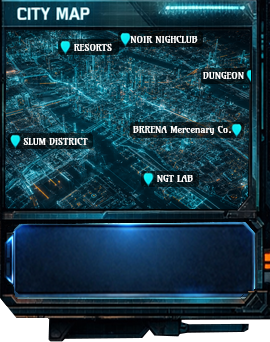
<style>
.page{position:relative;width:270px;height:342px}
.page>*{position:absolute;margin:0}
.t1{font:10px "Amarante-Regular";color:#ffffff}
</style>
<div class="page">
<p class="t1" style="left:130px;top:35px;width:68px;height:8px">NOIR NIGHCLUB</p>
<p class="t1" style="left:74px;top:43px;width:38px;height:8px">RESORTS</p>
<p class="t1" style="left:203px;top:71px;width:41px;height:8px">DUNGEON</p>
<p class="t1" style="left:133px;top:125px;width:98px;height:10px">BRRENA Mercenary Co.</p>
<p class="t1" style="left:23px;top:137px;width:65px;height:8px">SLUM DiSTRICT</p>
<p class="t1" style="left:157px;top:174px;width:36px;height:8px">NGT LAB</p>
</div>
